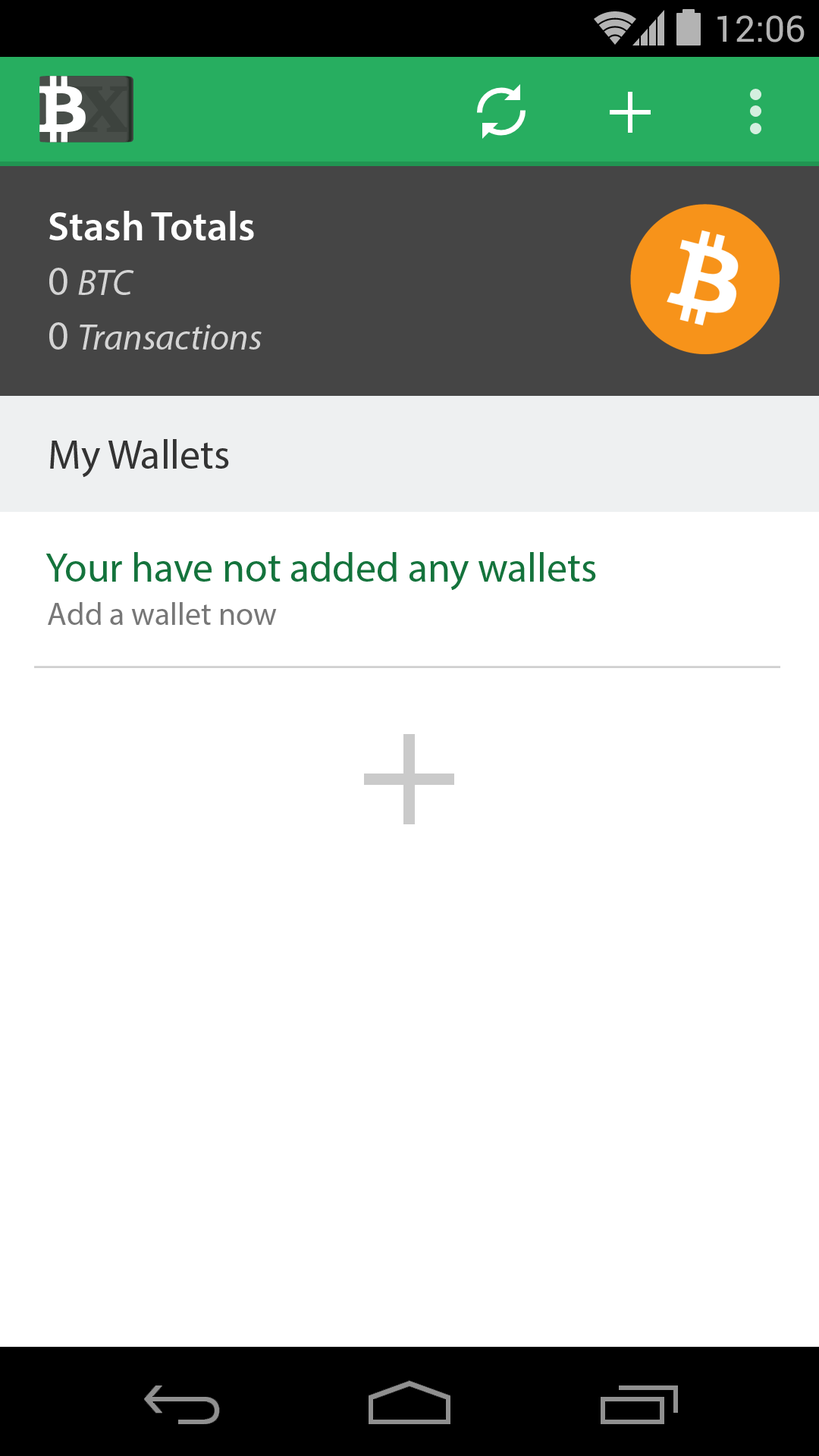
<style>
.page{position:relative;width:819px;height:1456px;background:#ffffff}
.page>*{position:absolute;margin:0}
.t1{font:36.4px "Roboto-Regular";color:#b3b3b3}
.t2{font:40.9px "MyriadPro-Semibold";color:#ffffff}
.t3{font:36.4px "MyriadPro-It";color:#d4d4d4}
.t4{font:40.9px "MyriadPro-Regular";color:#d4d4d4}
.t5{font:40.9px "MyriadPro-Regular";color:#333333}
.t6{font:40.9px "MyriadPro-Regular";color:#14733c}
.t7{font:31.8px "MyriadPro-Regular";color:#777777}
</style>
<div class="page">
<p class="t1" style="left:717px;top:15px;width:88px;height:27px">12:06</p>
<p class="t2" style="left:49px;top:211px;width:205px;height:29px">Stash Totals</p>
<p class="t2" style="left:49px;top:211px;width:205px;height:29px">Stash Totals</p>
<p class="t3" style="left:49px;top:268px;width:85px;height:27px"><span class="t4">0 </span>BTC</p>
<p class="t3" style="left:49px;top:268px;width:85px;height:27px"><span class="t4">0 </span>BTC</p>
<p class="t3" style="left:49px;top:322px;width:213px;height:28px"><span class="t4">0 </span>Transactions</p>
<p class="t3" style="left:49px;top:322px;width:213px;height:28px"><span class="t4">0 </span>Transactions</p>
<p class="t5" style="left:50px;top:439px;width:179px;height:38px">My Wallets</p>
<p class="t6" style="left:45px;top:552px;width:551px;height:38px">Your have not added any wallets</p>
<p class="t7" style="left:48px;top:602px;width:229px;height:23px">Add a wallet now</p>
</div>
